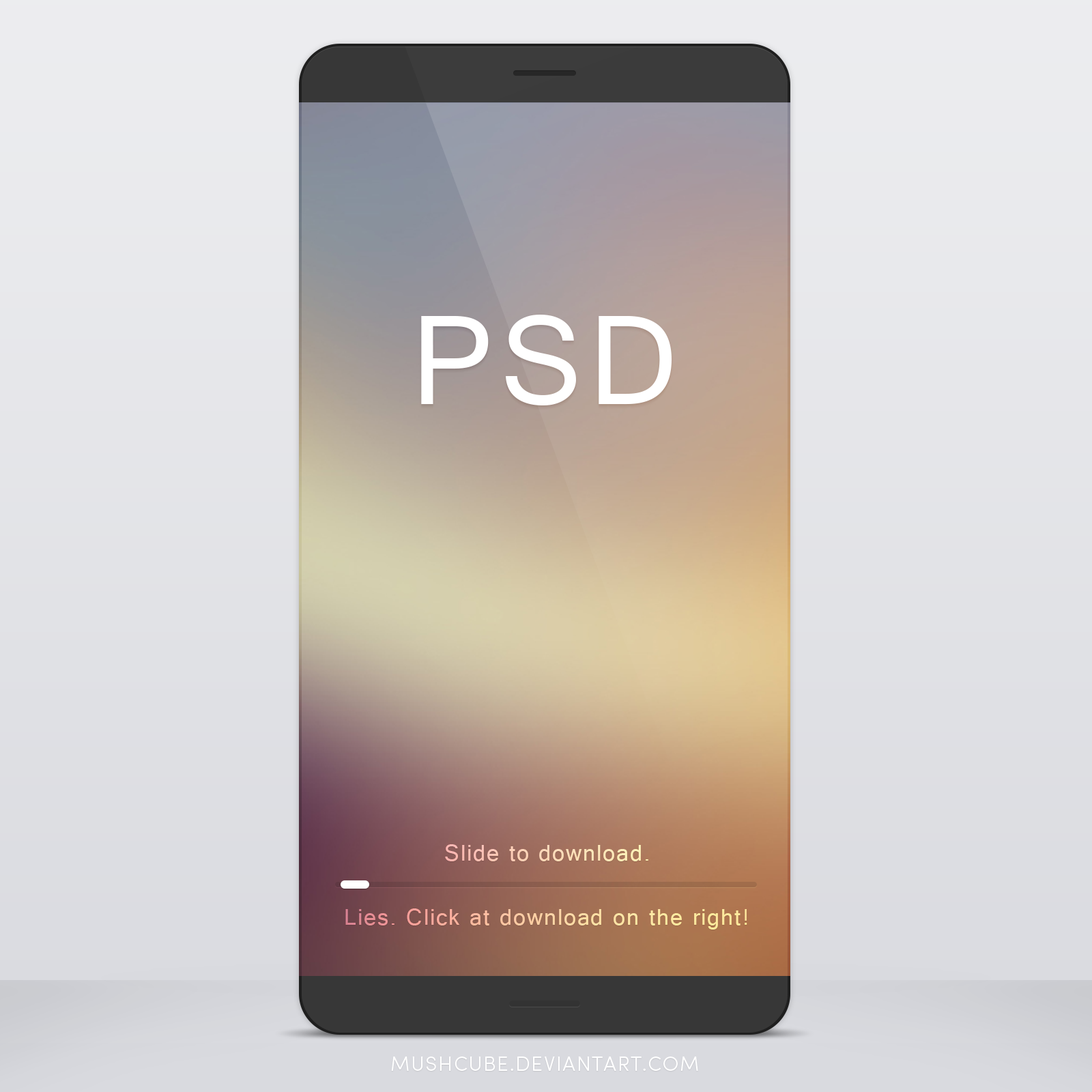
<style>
.page{position:relative;width:1092px;height:1092px}
.page>*{position:absolute;margin:0}
.t1{font:24.6px "Raavi";letter-spacing:0.05em}
.t2{font:20.5px "SofiaProLight";letter-spacing:0.05em;color:#ffffff;text-transform:uppercase}
</style>
<div class="page">
<p class="t1" style="left:445px;top:844px;width:203px;height:17px">Slide to download.</p>
<p class="t1" style="left:345px;top:908px;width:402px;height:22px">Lies. Click at download on the right!</p>
<p class="t2" style="left:391px;top:1056px;width:307px;height:15px">mushcube.deviantart.com</p>
</div>
